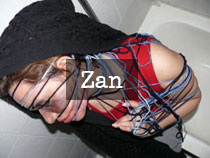
<style>
.page{position:relative;width:210px;height:158px}
.page>*{position:absolute;margin:0}
.t1{font:22px "Passport";color:#ffffff}
</style>
<div class="page">
<p class="t1" style="left:81px;top:71px;width:42px;height:17px">Zan</p>
</div>
